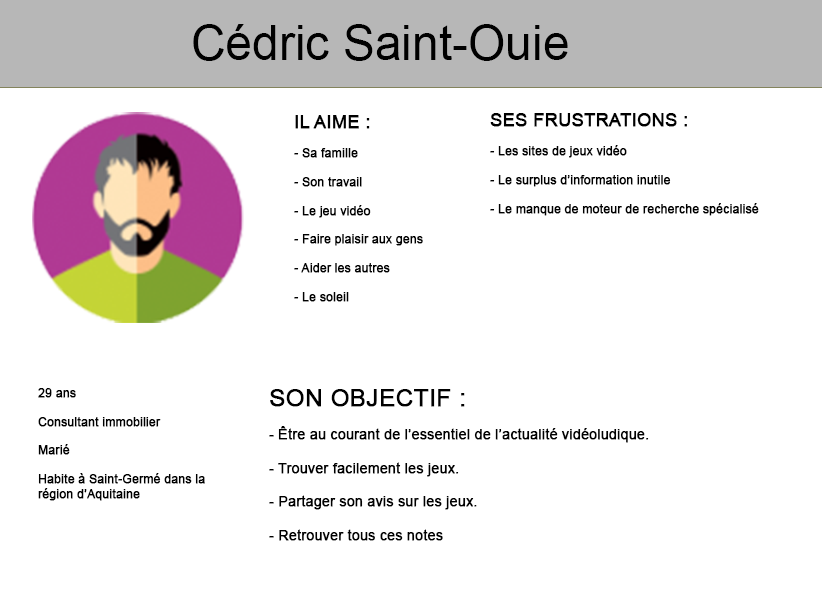
<style>
.page{position:relative;width:822px;height:595px;background:#ffffff}
.page>*{position:absolute;margin:0}
.t1{font:48px "ArialMT";color:#000000}
.t2{font:12px "ArialMT";color:#000000;font-weight:bold}
.t3{font:18px "ArialMT";color:#000000;font-weight:bold}
.t4{font:14px "ArialMT";color:#000000;font-weight:bold}
.t5{font:24px "ArialMT";color:#000000;font-weight:bold}
</style>
<div class="page">
<p class="t1" style="left:193px;top:24px;width:375px;height:37px">Cédric Saint-Ouie</p>
<p class="t2" style="left:490px;top:113px;width:269px;height:103px"><span class="t3">SES FRUSTRATIONS :</span><br><br>- Les sites de jeux vidéo<br><br>- Le surplus d’information inutile<br><br>- Le manque de moteur de recherche spécialisé</p>
<p class="t2" style="left:294px;top:115px;width:129px;height:187px"><span class="t3">IL AIME : </span><br><br>- Sa famille<br><br>- Son travail<br><br>- Le jeu vidéo<br><br>- Faire plaisir aux gens<br><br>- Aider les autres<br><br>- Le soleil</p>
<p class="t2" style="left:38px;top:388px;width:167px;height:113px">29 ans<br><br>Consultant immobilier<br><br>Marié<br><br>Habite à Saint-Germé dans la région d’Aquitaine</p>
<p class="t4" style="left:269px;top:389px;width:380px;height:152px"><span class="t5">SON OBJECTIF :</span><br><br>- Être au courant de l’essentiel de l’actualité vidéoludique.<br><br>- Trouver facilement les jeux.<br><br>- Partager son avis sur les jeux.<br><br>- Retrouver tous ces notes</p>
</div>
